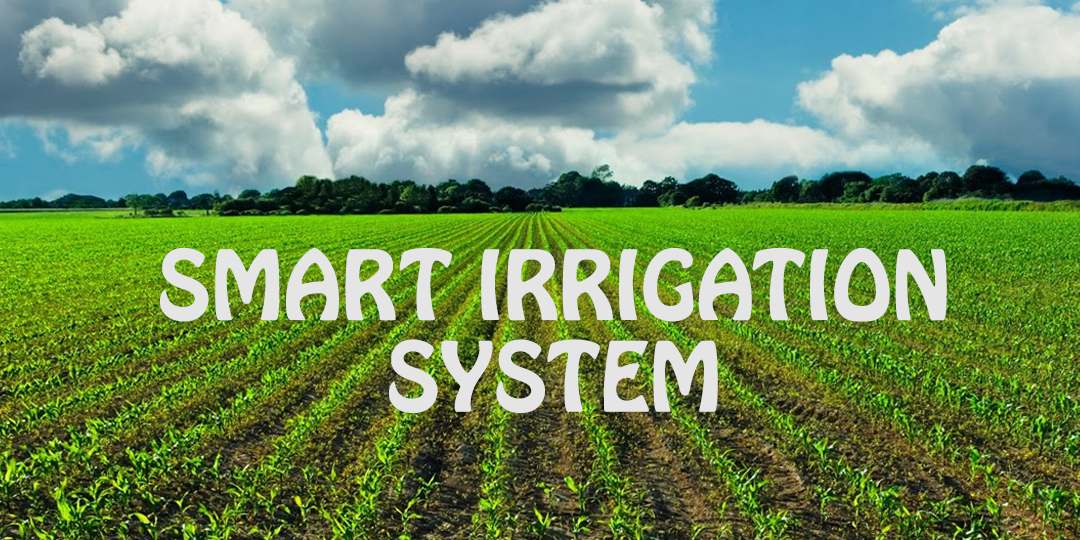
<style>
.page{position:relative;width:1080px;height:540px}
.page>*{position:absolute;margin:0}
.t1{font:85px/91.7px "HoboStd";color:#e5e5e5}
</style>
<div class="page">
<p class="t1" style="left:160px;top:247px;width:787px;height:166px;text-align:center">SMART IRRIGATION<br>SYSTEM</p>
</div>
